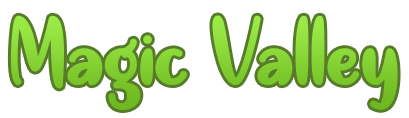
<style>
.page{position:relative;width:409px;height:118px;background:#ffffff}
.page>*{position:absolute;margin:0}
.t1{font:112px "QuiteMagical-Regular";color:#85d233}
</style>
<div class="page">
<p class="t1" style="left:10px;top:15px;width:388px;height:95px">Magic Valley</p>
</div>
